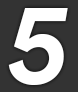
<style>
.page{position:relative;width:78px;height:92px;background:#333333}
.page>*{position:absolute;margin:0}
.t1{font:109.6px "ProductSans-BoldItalic";color:#ffffff}
</style>
<div class="page">
<p class="t1" style="left:8px;top:8px;width:60px;height:77px">5</p>
</div>
